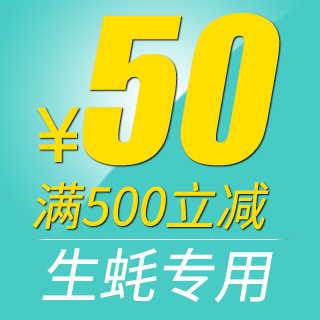
<style>
.page{position:relative;width:320px;height:320px;background:#48cbc5}
.page>*{position:absolute;margin:0}
.t1{font:185.5px "Impact";color:#ffdf00;font-style:italic}
.t2{font:73.1px "Mangal";color:#ffdf00}
.t3{font:51.4px "SourceHanSansCN-Regular";color:#ffdf00;font-style:italic}
.t4{font:58.6px "SourceHanSansCN-Regular";color:#ffffff;font-style:italic}
</style>
<div class="page">
<p class="t1" style="left:82px;top:12px;width:198px;height:154px">50</p>
<p class="t2" style="left:37px;top:107px;width:43px;height:55px">¥</p>
<p class="t3" style="left:33px;top:181px;width:236px;height:49px">满500立减</p>
<p class="t4" style="left:42px;top:248px;width:231px;height:55px">生蚝专用</p>
</div>
